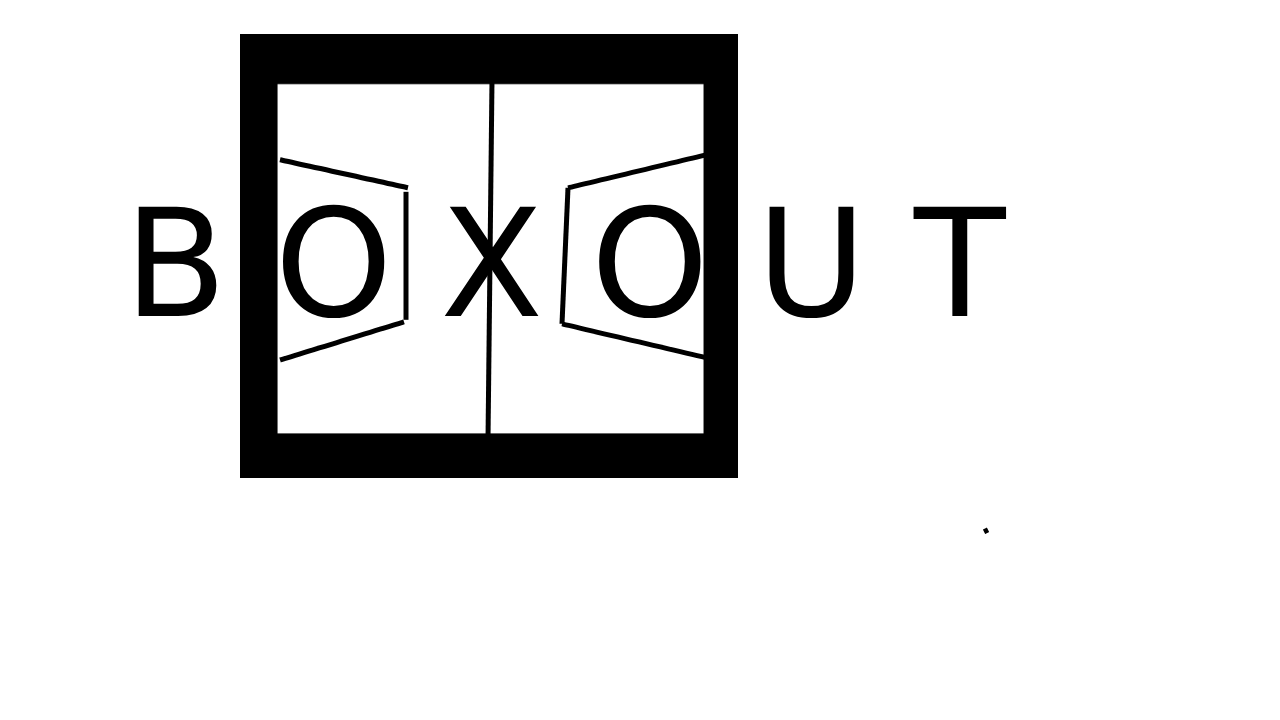
<style>
.page{position:relative;width:1280px;height:720px;background:#ffffff}
.page>*{position:absolute;margin:0}
.t1{font:150px "DejaVuSans";color:#000000}
</style>
<div class="page">
<p class="t1" style="left:138px;top:204px;width:869px;height:115px">B O X O U T</p>
</div>
